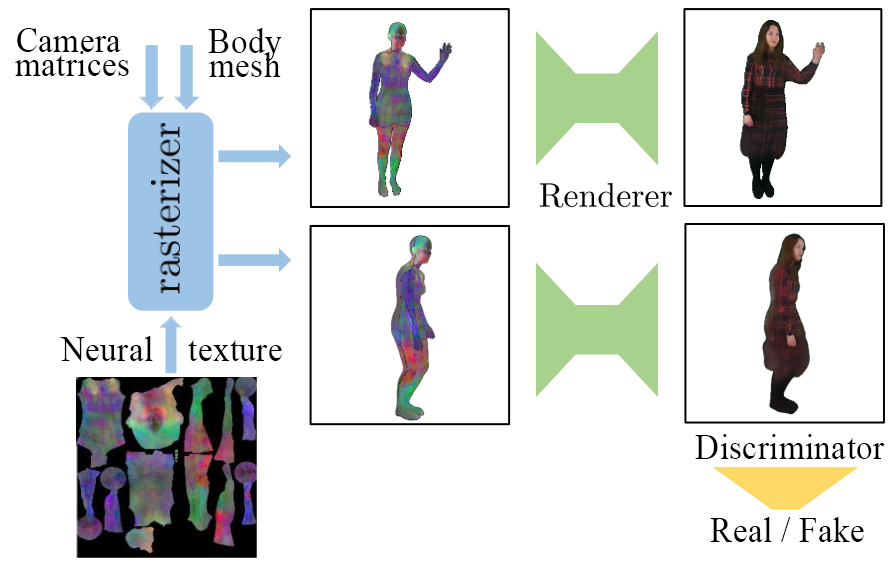
<style>
.page{position:relative;width:895px;height:569px;background:#ffffff}
.page>*{position:absolute;margin:0}
.t1{font:35.7px/23.3px "TimesNewRomanPSMT";letter-spacing:0.01em;color:#000000;scale:0.93 1}
.t2{font:35.7px "TimesNewRomanPSMT";letter-spacing:0.01em;color:#000000;scale:0.93 1}
</style>
<div class="page">
<p class="t1" style="left:15px;top:28px;width:114px;height:48px;text-align:center">Camera <br>matrices</p>
<p class="t1" style="left:208px;top:28px;width:74px;height:49px;text-align:center">Body<br>mesh</p>
<p class="t2" style="left:60px;top:336px;width:222px;height:26px">Neural    texture</p>
<p class="t2" style="left:695px;top:434px;width:190px;height:25px">Discriminator</p>
<p class="t2" style="left:710px;top:517px;width:154px;height:25px">Real / Fake</p>
</div>
